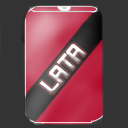
<style>
.page{position:relative;width:128px;height:128px;background:#333333}
.page>*{position:absolute;margin:0}
.t1{font:17.6px "Gameplay";color:#ffffff}
</style>
<div class="page">
<p class="t1" style="left:39px;top:43px;width:47px;height:51px;rotate:-50deg">Lata</p>
</div>
